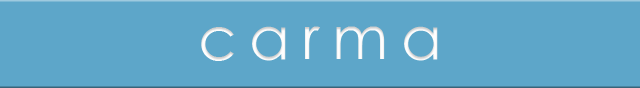
<style>
.page{position:relative;width:640px;height:88px;background:#5da6c9}
.page>*{position:absolute;margin:0}
.t1{font:60px "STHeitiTC-Light";letter-spacing:0.2em;color:#fefefe}
</style>
<div class="page">
<p class="t1" style="left:201px;top:26px;width:237px;height:35px">carma</p>
</div>
